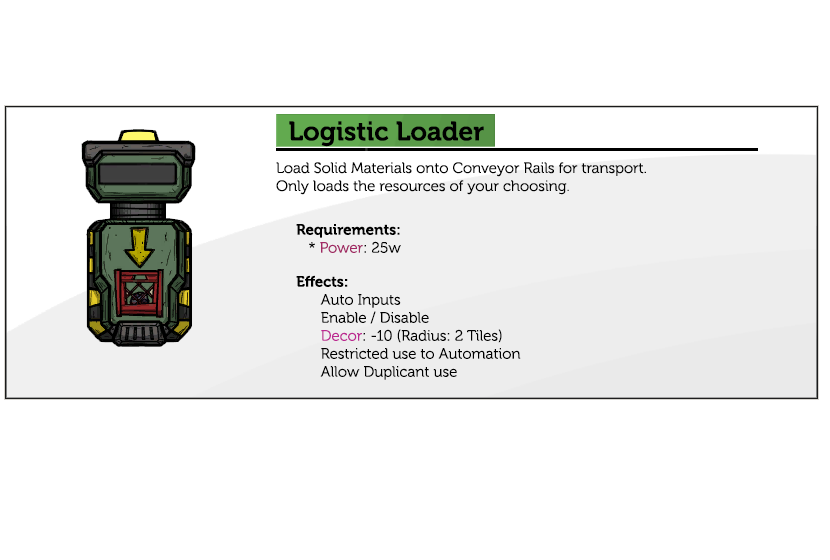
<style>
.page{position:relative;width:830px;height:560px;background:#ffffff}
.page>*{position:absolute;margin:0}
.t1{font:26.7px "Museo-700";color:#000000}
.t2{font:15px "Museo-300";color:#000000}
.t3{font:15px "Museo-700";color:#000000}
.t4{font:15px "Museo-300";color:#a12864}
.t5{font:15px "Museo-300";color:#bc2991}
</style>
<div class="page">
<p class="t1" style="left:289px;top:121px;width:195px;height:26px">Logistic Loader</p>
<p class="t2" style="left:276px;top:162px;width:370px;height:33px">Load Solid Materials onto Conveyor Rails for transport.<br>Only loads the resources of your choosing.</p>
<p class="t3" style="left:296px;top:224px;width:105px;height:29px">Requirements:<br><span class="t2">   * </span><span class="t4">Power</span><span class="t2">: 25w</span></p>
<p class="t2" style="left:296px;top:275px;width:225px;height:105px"><span class="t3">Effects:</span><br>      Auto Inputs<br>      Enable / Disable<br>      <span class="t5">Decor</span>: -10 (Radius: 2 Tiles)<br>      Restricted use to Automation<br>      Allow Duplicant use</p>
</div>
